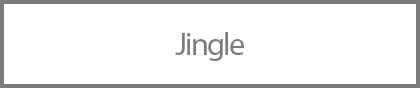
<style>
.page{position:relative;width:420px;height:88px;background:#ffffff}
.page>*{position:absolute;margin:0}
.t1{font:32px "MyriadPro-Regular";letter-spacing:-0.05em;color:#7a7a7a}
</style>
<div class="page">
<p class="t1" style="left:175px;top:32px;width:69px;height:29px">Jingle</p>
</div>
